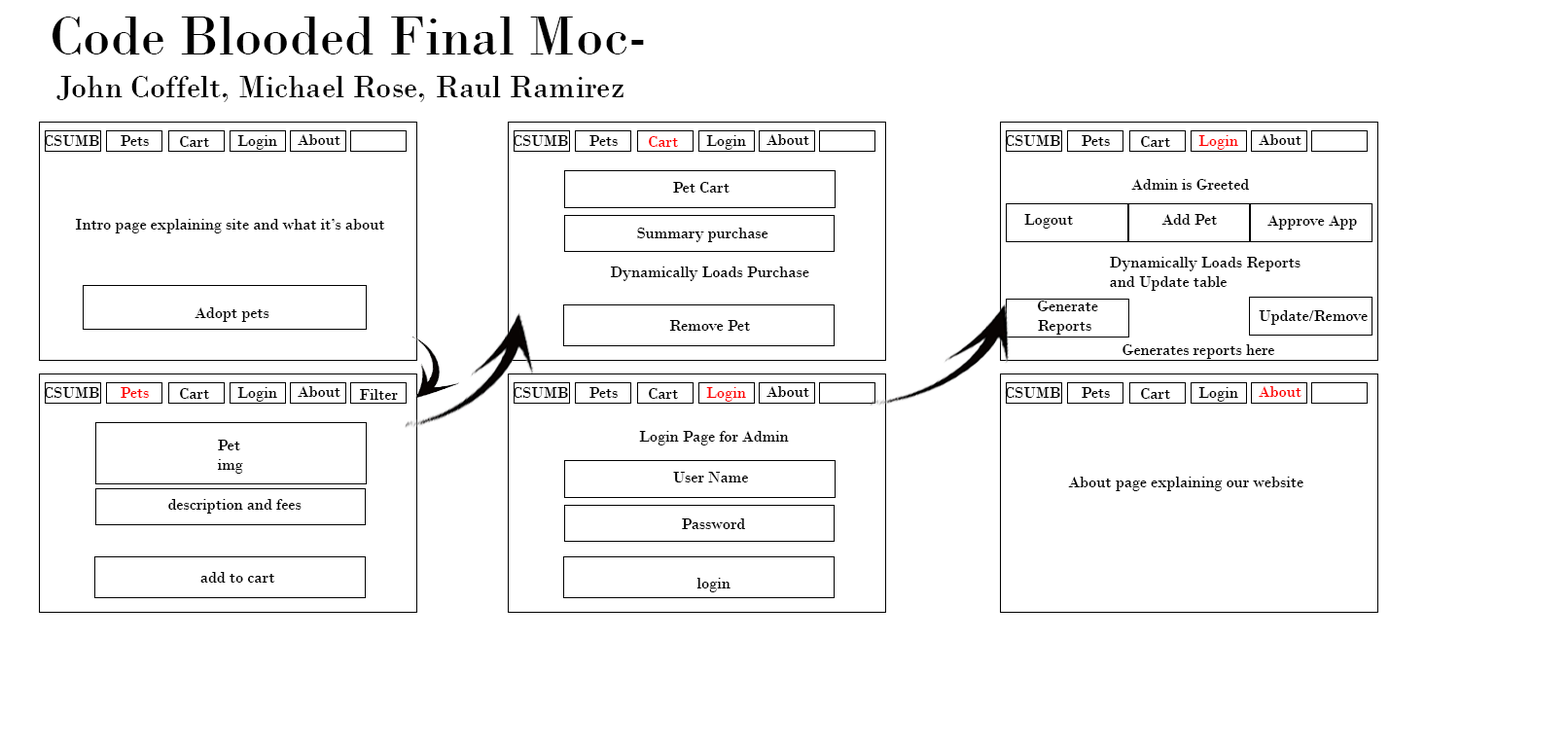
<style>
.page{position:relative;width:1568px;height:747px;background:#ffffff}
.page>*{position:absolute;margin:0}
.t1{font:56.7px "BodoniMT";color:#000000}
.t2{font:32.4px "BodoniMT";color:#000000}
.t3{font:16.2px "BodoniMT";color:#000000}
.t4{font:16.2px "BodoniMT";color:#ff0000}
.t5{font:16.2px "BodoniMT";color:#fe0000}
</style>
<div class="page">
<p class="t1" style="left:53px;top:17px;width:591px;height:38px">Code Blooded Final Moc-</p>
<p class="t2" style="left:56px;top:76px;width:568px;height:26px">John Coffelt, Michael Rose, Raul Ramirez</p>
<p class="t3" style="left:44px;top:135px;width:55px;height:11px">CSUMB</p>
<p class="t3" style="left:121px;top:135px;width:28px;height:11px">Pets</p>
<p class="t3" style="left:180px;top:136px;width:29px;height:11px">Cart</p>
<p class="t3" style="left:237px;top:135px;width:40px;height:15px">Login</p>
<p class="t3" style="left:298px;top:134px;width:42px;height:11px">About</p>
<p class="t3" style="left:513px;top:135px;width:55px;height:11px">CSUMB</p>
<p class="t3" style="left:589px;top:135px;width:29px;height:11px">Pets</p>
<p class="t4" style="left:649px;top:136px;width:29px;height:11px">Cart</p>
<p class="t3" style="left:706px;top:135px;width:40px;height:15px">Login</p>
<p class="t3" style="left:766px;top:134px;width:43px;height:11px">About</p>
<p class="t3" style="left:1005px;top:135px;width:55px;height:11px">CSUMB</p>
<p class="t3" style="left:1082px;top:135px;width:28px;height:11px">Pets</p>
<p class="t3" style="left:1141px;top:136px;width:29px;height:11px">Cart</p>
<p class="t4" style="left:1198px;top:135px;width:40px;height:15px">Login</p>
<p class="t3" style="left:1259px;top:134px;width:42px;height:11px">About</p>
<p class="t3" style="left:673px;top:182px;width:57px;height:11px">Pet Cart</p>
<p class="t3" style="left:1131px;top:179px;width:118px;height:11px">Admin is Greeted</p>
<p class="t3" style="left:75px;top:219px;width:310px;height:14px">Intro page explaining site and what it’s about</p>
<p class="t3" style="left:1024px;top:214px;width:49px;height:15px">Logout</p>
<p class="t3" style="left:1161px;top:214px;width:56px;height:11px">Add Pet</p>
<p class="t3" style="left:1267px;top:215px;width:90px;height:15px">Approve App</p>
<p class="t3" style="left:637px;top:228px;width:131px;height:14px">Summary purchase</p>
<p class="t3" style="left:1110px;top:257px;width:191px;height:34px">Dynamically Loads Reports <br>and Update table</p>
<p class="t3" style="left:610px;top:267px;width:199px;height:14px">Dynamically Loads Purchase</p>
<p class="t3" style="left:1037px;top:301px;width:61px;height:34px">Generate <br>Reports</p>
<p class="t3" style="left:195px;top:307px;width:74px;height:15px">Adopt pets</p>
<p class="t3" style="left:1259px;top:310px;width:109px;height:15px">Update/Remove</p>
<p class="t3" style="left:669px;top:320px;width:81px;height:11px">Remove Pet</p>
<p class="t3" style="left:1123px;top:344px;width:151px;height:15px">Generates reports here</p>
<p class="t3" style="left:44px;top:387px;width:55px;height:11px">CSUMB</p>
<p class="t4" style="left:121px;top:387px;width:28px;height:11px">Pets</p>
<p class="t3" style="left:180px;top:388px;width:29px;height:11px">Cart</p>
<p class="t3" style="left:237px;top:387px;width:40px;height:15px">Login</p>
<p class="t3" style="left:298px;top:386px;width:42px;height:11px">About</p>
<p class="t3" style="left:360px;top:389px;width:38px;height:11px">Filter</p>
<p class="t3" style="left:513px;top:387px;width:55px;height:11px">CSUMB</p>
<p class="t3" style="left:589px;top:387px;width:29px;height:11px">Pets</p>
<p class="t3" style="left:649px;top:388px;width:29px;height:11px">Cart</p>
<p class="t5" style="left:706px;top:387px;width:40px;height:15px">Login</p>
<p class="t3" style="left:766px;top:386px;width:43px;height:11px">About</p>
<p class="t3" style="left:1005px;top:387px;width:55px;height:11px">CSUMB</p>
<p class="t3" style="left:1082px;top:387px;width:28px;height:11px">Pets</p>
<p class="t3" style="left:1141px;top:388px;width:29px;height:11px">Cart</p>
<p class="t3" style="left:1198px;top:387px;width:40px;height:15px">Login</p>
<p class="t5" style="left:1259px;top:386px;width:42px;height:11px">About</p>
<p class="t3" style="left:639px;top:431px;width:150px;height:14px">Login Page for Admin</p>
<p class="t3" style="left:217px;top:440px;width:26px;height:34px">Pet <br>img</p>
<p class="t3" style="left:673px;top:472px;width:75px;height:10px">User Name</p>
<p class="t3" style="left:1068px;top:477px;width:235px;height:14px">About page explaining our website</p>
<p class="t3" style="left:168px;top:499px;width:134px;height:15px">description and fees</p>
<p class="t3" style="left:682px;top:518px;width:63px;height:11px">Password</p>
<p class="t3" style="left:200px;top:572px;width:75px;height:11px">add to cart</p>
<p class="t3" style="left:696px;top:578px;width:35px;height:14px">login</p>
</div>
